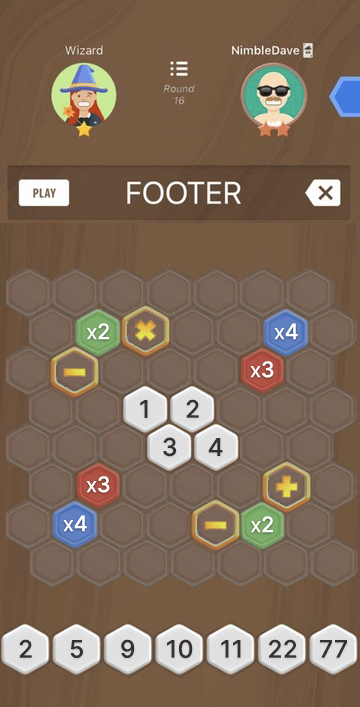
<style>
.page{position:relative;width:360px;height:707px}
.page>*{position:absolute;margin:0}
.t1{font:21.5px "Inter-Medium";letter-spacing:0.01em;color:#ffffff;font-variant:small-caps}
.t2{font:24.4px "Inter-Medium";letter-spacing:0.01em;color:#34312f;font-variant:small-caps}
.t3{font:24.3px "Inter-Medium";letter-spacing:0.01em;color:#34312f;font-variant:small-caps}
.t4{font:24.5px "Inter-Medium";letter-spacing:0.01em;color:#34312f;font-variant:small-caps}
</style>
<div class="page">
<p class="t1" style="left:87px;top:323px;width:22px;height:17px">x2</p>
<p class="t1" style="left:274px;top:323px;width:24px;height:17px">x4</p>
<p class="t1" style="left:250px;top:361px;width:24px;height:17px">x3</p>
<p class="t2" style="left:140px;top:400px;width:8px;height:18px">1</p>
<p class="t3" style="left:186px;top:399px;width:13px;height:19px">2</p>
<p class="t4" style="left:163px;top:437px;width:14px;height:20px">3</p>
<p class="t2" style="left:208px;top:438px;width:15px;height:18px">4</p>
<p class="t1" style="left:86px;top:476px;width:24px;height:17px">x3</p>
<p class="t1" style="left:63px;top:515px;width:24px;height:17px">x4</p>
<p class="t1" style="left:251px;top:516px;width:22px;height:17px">x2</p>
<p class="t3" style="left:19px;top:639px;width:13px;height:19px">2</p>
<p class="t3" style="left:70px;top:640px;width:13px;height:18px">5</p>
<p class="t3" style="left:121px;top:639px;width:14px;height:19px">9</p>
<p class="t3" style="left:167px;top:639px;width:26px;height:20px">10</p>
<p class="t3" style="left:221px;top:640px;width:20px;height:18px">11</p>
<p class="t3" style="left:269px;top:639px;width:28px;height:19px">22</p>
<p class="t3" style="left:320px;top:640px;width:27px;height:18px">77</p>
</div>
